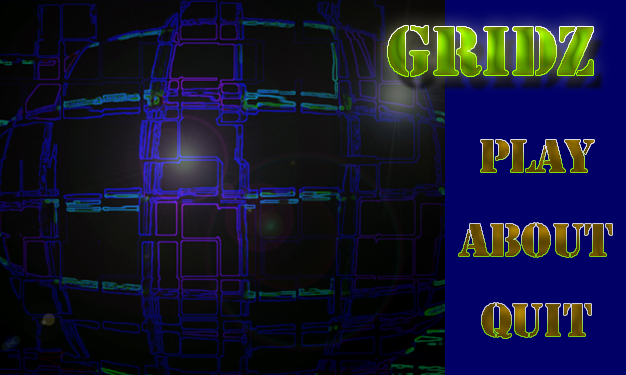
<style>
.page{position:relative;width:626px;height:375px}
.page>*{position:absolute;margin:0}
.t1{font:72px "Stencil"}
.t2{font:48px "Stencil";color:#674e00}
.t3{font:48px "Stencil";color:#694f00}
.t4{font:48px "Stencil";color:#664c00}
</style>
<div class="page">
<p class="t1" style="left:388px;top:26px;width:205px;height:50px">Gridz</p>
<p class="t2" style="left:481px;top:140px;width:113px;height:32px">Play</p>
<p class="t3" style="left:459px;top:223px;width:153px;height:34px">About</p>
<p class="t4" style="left:482px;top:303px;width:109px;height:35px">Quit</p>
</div>
